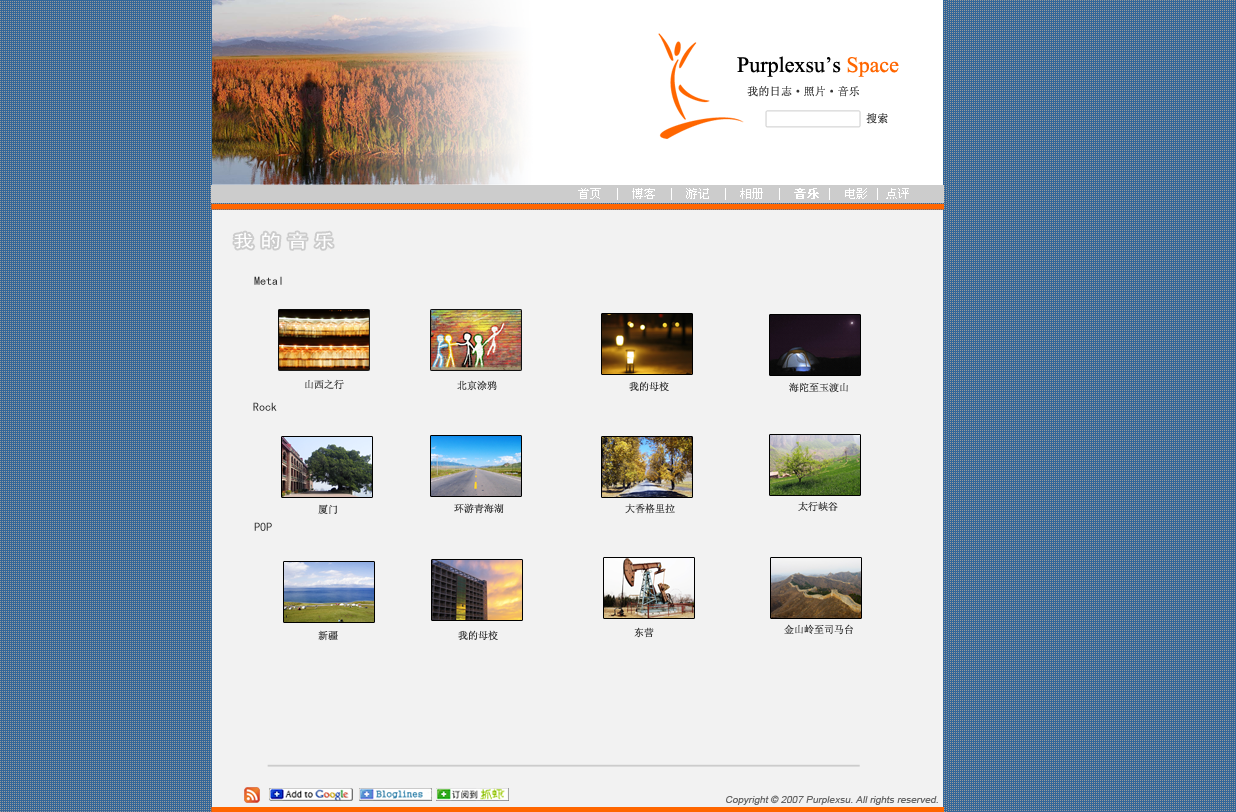
<style>
.page{position:relative;width:1236px;height:812px;background:#f2f2f2}
.page>*{position:absolute;margin:0}
.t1{font:22px "TimesNewRomanPSMT";color:#000000}
.t2{font:22px "TimesNewRomanPSMT";color:#ff6600}
.t3{font:11px "SimSun";color:#333333;font-weight:bold}
.t4{font:12px "SimSun";color:#ffffff}
.t5{font:12px "SimSun";color:#ffffff;font-weight:bold}
.t6{font:18px "SimHei";letter-spacing:0.24em;color:#ffffff;scale:1.2 1}
.t7{font:12px "SimHei";color:#333333}
.t8{font:10px "SimSun";color:#333333}
.t9{font:12px "SimHei"}
.t10{font:10px "ArialMT";color:#666666;font-style:italic}
</style>
<div class="page">
<p class="t1" style="left:737px;top:56px;width:162px;height:21px">Purplexsu’s <span class="t2">Space</span></p>
<p class="t3" style="left:747px;top:86px;width:112px;height:11px">我的日志·照片·音乐</p>
<p class="t3" style="left:866px;top:113px;width:22px;height:11px">搜索</p>
<p class="t4" style="left:578px;top:188px;width:331px;height:12px">首页  |  博客  |  游记  |  相册  |  <span class="t5">音乐</span> |  电影 | 点评</p>
<p class="t6" style="left:234px;top:232px;width:99px;height:17px">我的音乐</p>
<p class="t7" style="left:254px;top:276px;width:28px;height:9px">Metal</p>
<p class="t8" style="left:305px;top:379px;width:39px;height:11px">山西之行</p>
<p class="t8" style="left:457px;top:380px;width:40px;height:11px">北京涂鸦</p>
<p class="t8" style="left:629px;top:381px;width:40px;height:11px">我的母校</p>
<p class="t8" style="left:789px;top:382px;width:59px;height:11px">海陀至玉渡山</p>
<p class="t7" style="left:253px;top:402px;width:24px;height:9px">Rock</p>
<p class="t8" style="left:318px;top:504px;width:19px;height:10px">厦门</p>
<p class="t8" style="left:454px;top:503px;width:50px;height:11px">环游青海湖</p>
<p class="t8" style="left:625px;top:503px;width:50px;height:11px">大香格里拉</p>
<p class="t8" style="left:798px;top:501px;width:40px;height:11px">太行峡谷</p>
<p class="t9" style="left:254px;top:522px;width:18px;height:9px">POP</p>
<p class="t8" style="left:318px;top:630px;width:20px;height:11px">新疆</p>
<p class="t8" style="left:458px;top:630px;width:40px;height:11px">我的母校</p>
<p class="t8" style="left:634px;top:627px;width:20px;height:11px">东营</p>
<p class="t8" style="left:784px;top:624px;width:69px;height:11px">金山岭至司马台</p>
<p class="t10" style="left:726px;top:795px;width:212px;height:10px">Copyright © 2007 Purplexsu. All rights reserved.</p>
</div>
